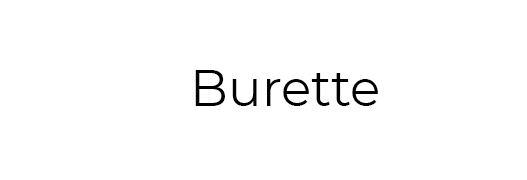
<style>
.page{position:relative;width:527px;height:180px;background:#ffffff}
.page>*{position:absolute;margin:0}
.t1{font:50px "Montserrat-Regular";color:#000000}
</style>
<div class="page">
<p class="t1" style="left:195px;top:70px;width:183px;height:36px">Burette</p>
</div>
